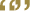
<style>
.page{position:relative;width:30px;height:11px;background:#9e8841}
.page>*{position:absolute;margin:0}
.t1{font:48px "Pop2EG-Bold-T-GB";color:#9e8841}
</style>
<div class="page">
<p class="t1" style="left:0px;top:0px;width:15px;height:11px">“</p>
<p class="t1" style="left:15px;top:0px;width:15px;height:11px">”</p>
</div>
